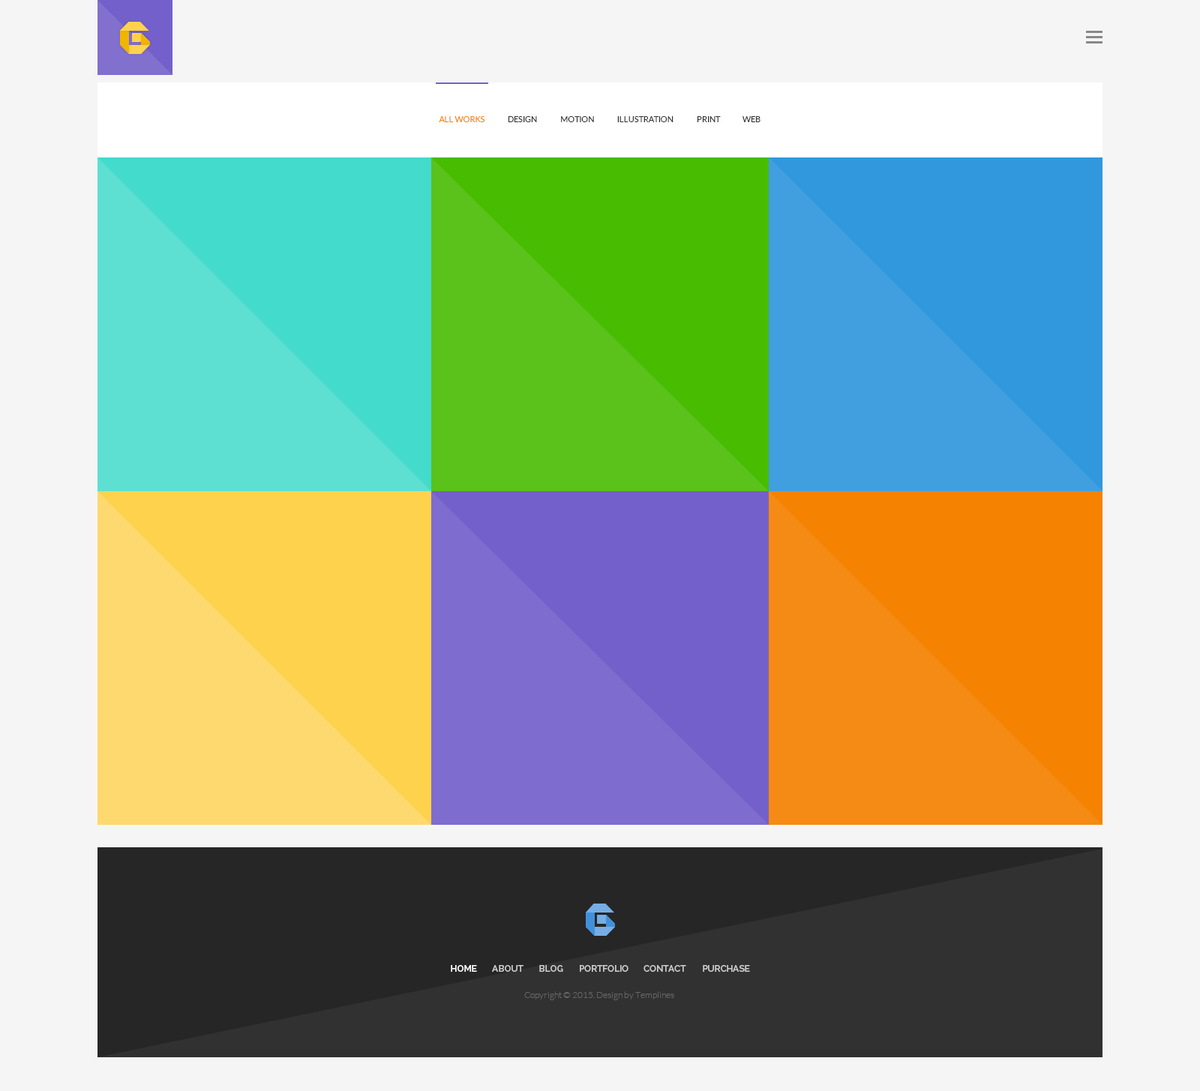
<style>
.page{position:relative;width:1200px;height:1091px;background:#f5f5f5}
.page>*{position:absolute;margin:0}
.t1{font:8.2px "Lato-Regular";color:#f58201;text-transform:uppercase}
.t2{font:8.2px "Lato-Regular";color:#333333;text-transform:uppercase}
.t3{font:9px "Raleway-SemiBold";color:#ffffff}
.t4{font:9px "Raleway-SemiBold";color:#cccccc}
.t5{font:9px "Lato-Light";color:#666666}
</style>
<div class="page">
<p class="t1" style="left:439px;top:116px;width:45px;height:6px">ALL works</p>
<p class="t2" style="left:508px;top:116px;width:29px;height:6px">design</p>
<p class="t2" style="left:561px;top:116px;width:33px;height:6px">motion</p>
<p class="t2" style="left:617px;top:116px;width:57px;height:6px">illustration</p>
<p class="t2" style="left:697px;top:116px;width:24px;height:6px">print</p>
<p class="t2" style="left:742px;top:116px;width:18px;height:6px">web</p>
<p class="t3" style="left:451px;top:965px;width:26px;height:7px">HOME</p>
<p class="t4" style="left:492px;top:965px;width:32px;height:7px">ABOUT</p>
<p class="t4" style="left:539px;top:965px;width:24px;height:7px">BLOG</p>
<p class="t4" style="left:580px;top:965px;width:48px;height:7px">PORTFOLIO</p>
<p class="t4" style="left:644px;top:965px;width:42px;height:7px">CONTACT</p>
<p class="t4" style="left:703px;top:965px;width:47px;height:7px">PURCHASE</p>
<p class="t5" style="left:524px;top:992px;width:150px;height:8px">Copyright © 2015. Design by Templines</p>
</div>
